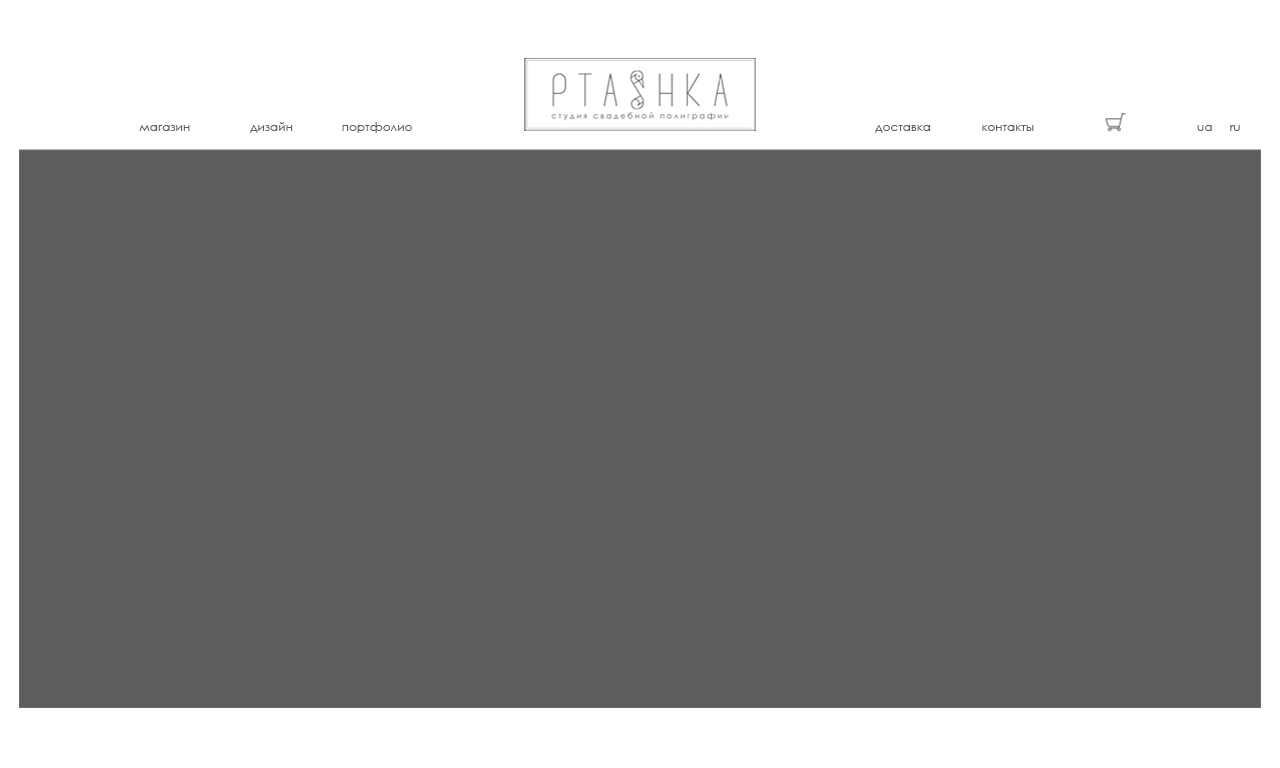
<style>
.page{position:relative;width:1280px;height:768px;background:#5d5d5d}
.page>*{position:absolute;margin:0}
.t1{font:12px "CenturyGothic";color:#5d5d5d}
</style>
<div class="page">
<p class="t1" style="left:139px;top:125px;width:51px;height:6px">магазин</p>
<p class="t1" style="left:250px;top:122px;width:43px;height:11px">дизайн</p>
<p class="t1" style="left:342px;top:122px;width:70px;height:11px">портфолио</p>
<p class="t1" style="left:875px;top:125px;width:56px;height:8px">доставка</p>
<p class="t1" style="left:982px;top:125px;width:52px;height:6px">контакты</p>
<p class="t1" style="left:1197px;top:125px;width:15px;height:6px">ua</p>
<p class="t1" style="left:1230px;top:125px;width:10px;height:6px">ru</p>
</div>
